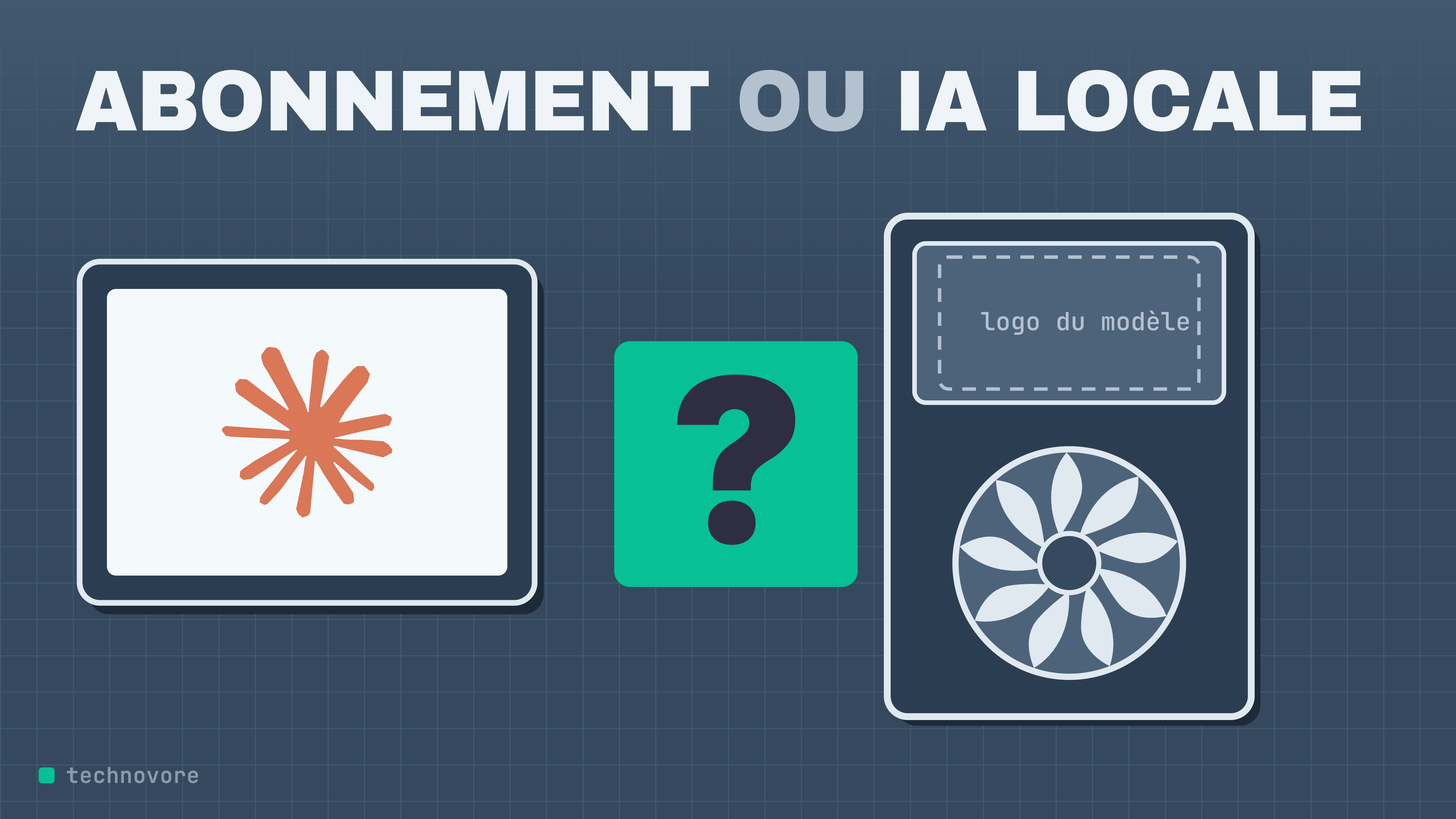
<style>
.page{position:relative;width:1456px;height:819px;background:#34495e}
.page>*{position:absolute;margin:0}
.t1{font:86.4px "ArchivoBlack-Regular";letter-spacing:-0.01em;color:#eff4f8;scale:0.93 1}
.t2{font:86.4px "ArchivoBlack-Regular";letter-spacing:-0.01em;color:#b4c1cf;scale:0.93 1}
.t3{font:25px "JetBrainsMono-Medium";color:#b4c1cf}
</style>
<div class="page">
<p class="t1" style="left:75px;top:70px;width:1286px;height:62px">ABONNEMENT <span class="t2">OU</span> IA LOCALE</p>
<p class="t3" style="left:981px;top:311px;width:208px;height:24px">logo du modèle</p>
</div>
